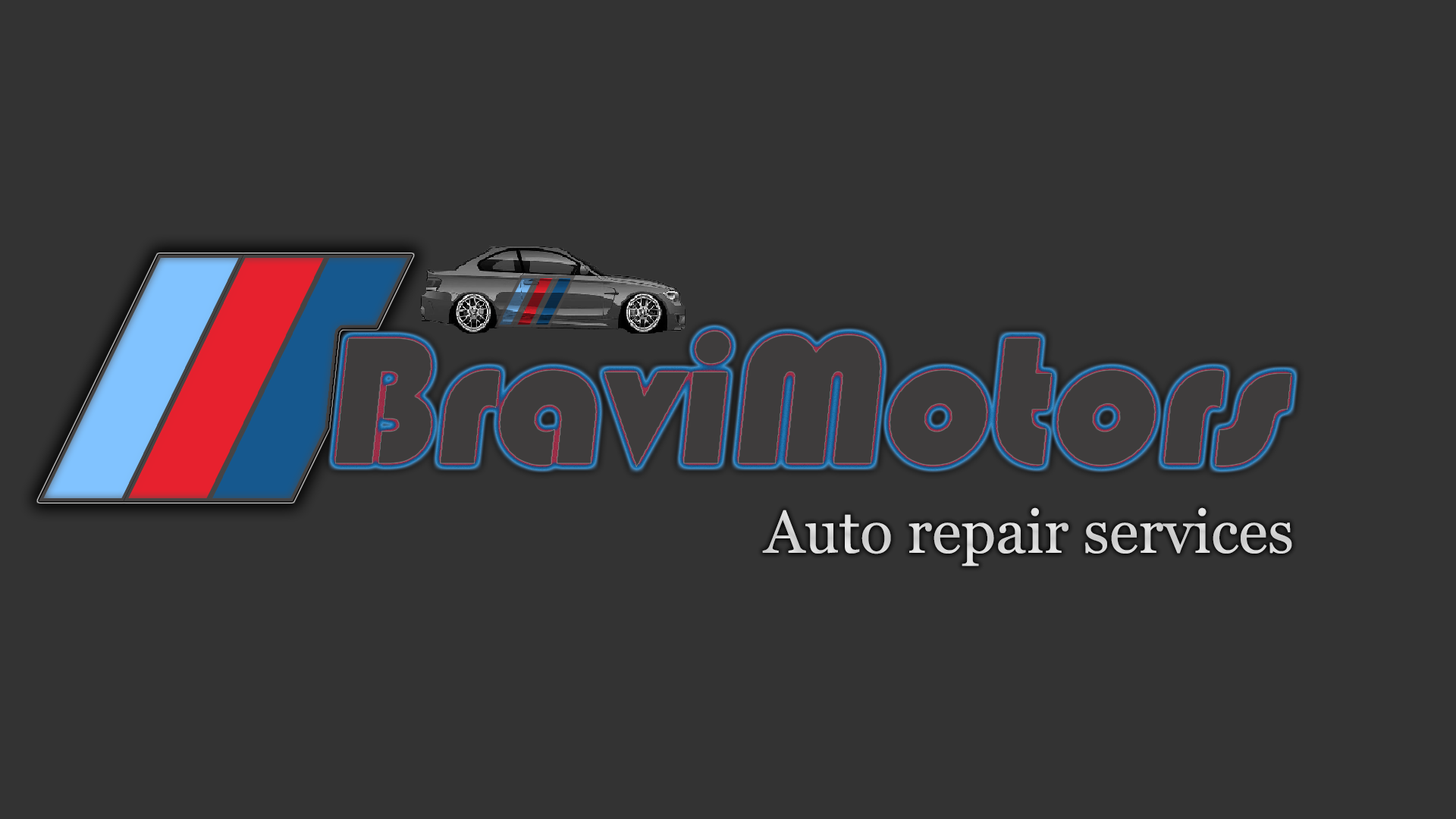
<style>
.page{position:relative;width:1456px;height:819px;background:#333333}
.page>*{position:absolute;margin:0}
.t1{font:60.4px "Georgia";color:#d6d6d6}
</style>
<div class="page">
<p class="t1" style="left:762px;top:507px;width:530px;height:59px">Auto repair services</p>
</div>
